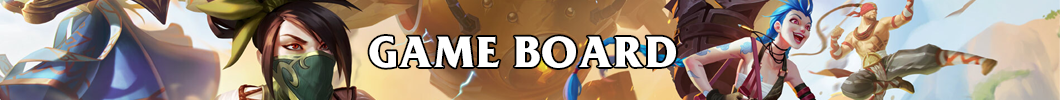
<style>
.page{position:relative;width:1060px;height:100px}
.page>*{position:absolute;margin:0}
.t1{font:40px "FrizQuadrataBold";color:#ffffff}
</style>
<div class="page">
<p class="t1" style="left:369px;top:36px;width:307px;height:32px">GAME BOARD</p>
</div>
